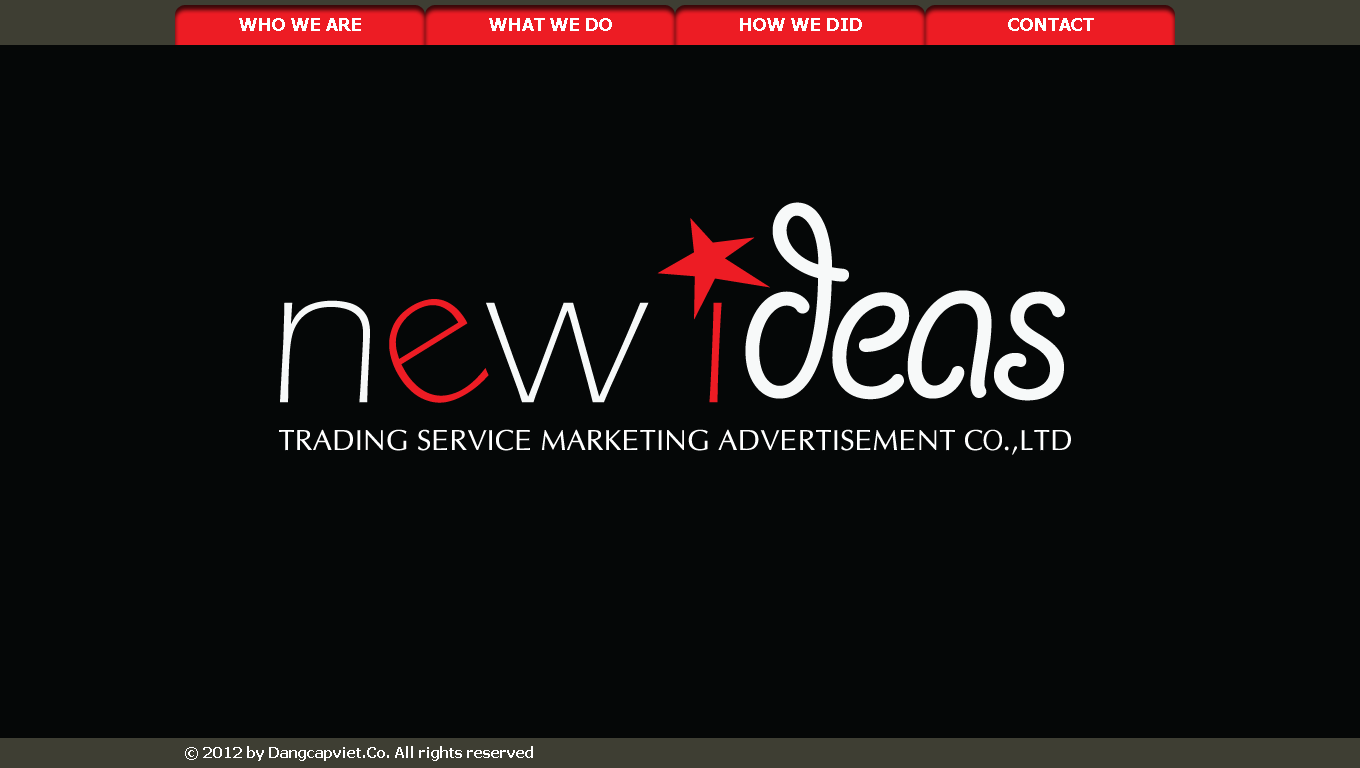
<style>
.page{position:relative;width:1360px;height:768px;background:#050707}
.page>*{position:absolute;margin:0}
.t1{font:18px "Tahoma-Bold";color:#ffffff}
.t2{font:15px "Tahoma-Bold";color:#ffffff}
</style>
<div class="page">
<p class="t1" style="left:239px;top:18px;width:122px;height:13px">WHO WE ARE</p>
<p class="t1" style="left:489px;top:18px;width:123px;height:13px">WHAT WE DO</p>
<p class="t1" style="left:740px;top:18px;width:122px;height:13px">HOW WE DID</p>
<p class="t1" style="left:1008px;top:18px;width:86px;height:13px">CONTACT</p>
<p class="t2" style="left:185px;top:746px;width:348px;height:15px">© 2012 by Dangcapviet.Co. All rights reserved</p>
</div>
